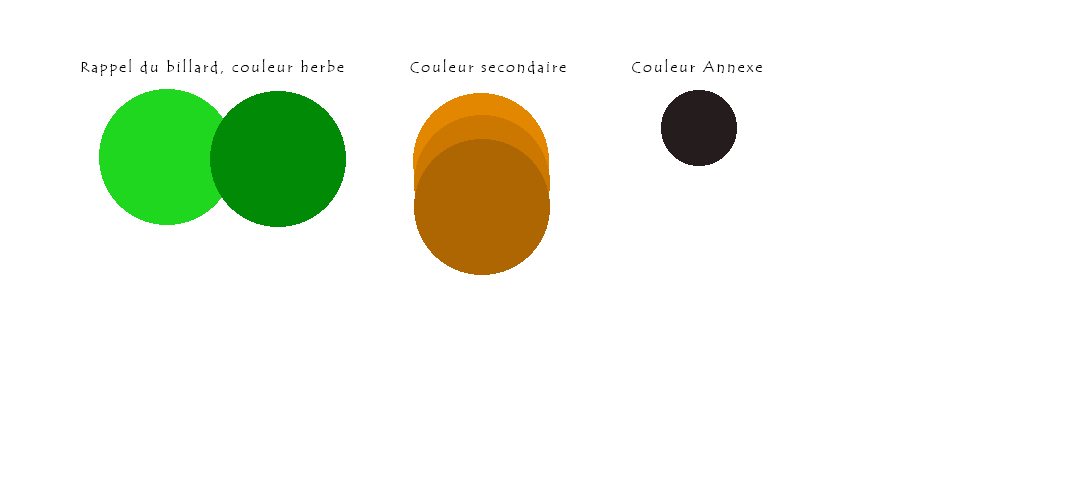
<style>
.page{position:relative;width:1080px;height:500px;background:#ffffff}
.page>*{position:absolute;margin:0}
.t1{font:15px "TempusSansITC";letter-spacing:0.14em;color:#010101}
</style>
<div class="page">
<p class="t1" style="left:81px;top:59px;width:263px;height:17px">Rappel du billard, couleur herbe</p>
<p class="t1" style="left:410px;top:59px;width:156px;height:15px">Couleur secondaire</p>
<p class="t1" style="left:632px;top:59px;width:130px;height:14px">Couleur Annexe</p>
</div>
